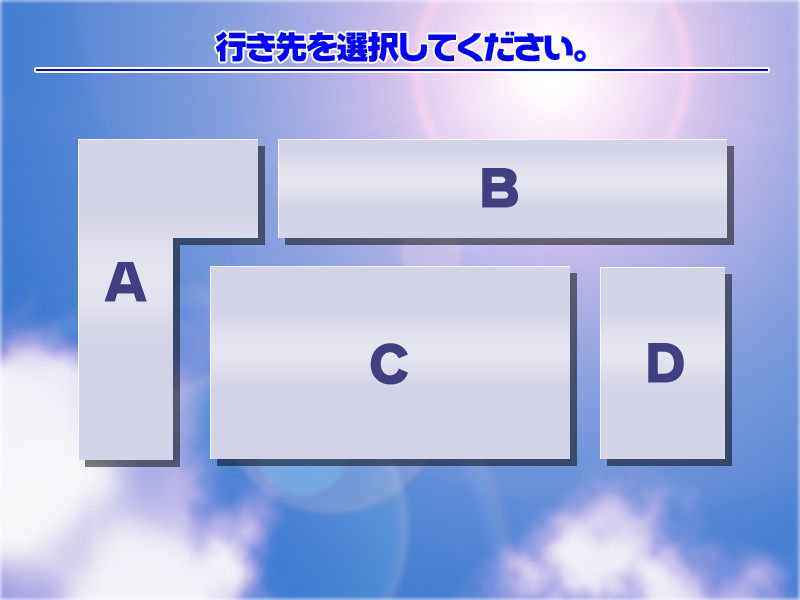
<style>
.page{position:relative;width:800px;height:600px;background:#d4d4e8}
.page>*{position:absolute;margin:0}
.t1{font:32px "NIS-WNKS-L10-S10P-83pv-RKSJ-H";color:#0000ff}
.t2{font:48px "NIS-WNKS-L10-S10P-83pv-RKSJ-H";color:#404080}
</style>
<div class="page">
<p class="t1" style="left:215px;top:31px;width:371px;height:31px">行き先を選択してください。</p>
<p class="t2" style="left:482px;top:168px;width:36px;height:40px">Ｂ</p>
<p class="t2" style="left:104px;top:262px;width:43px;height:40px">A</p>
<p class="t2" style="left:370px;top:343px;width:38px;height:42px">C</p>
<p class="t2" style="left:648px;top:343px;width:36px;height:40px">Ｄ</p>
</div>
